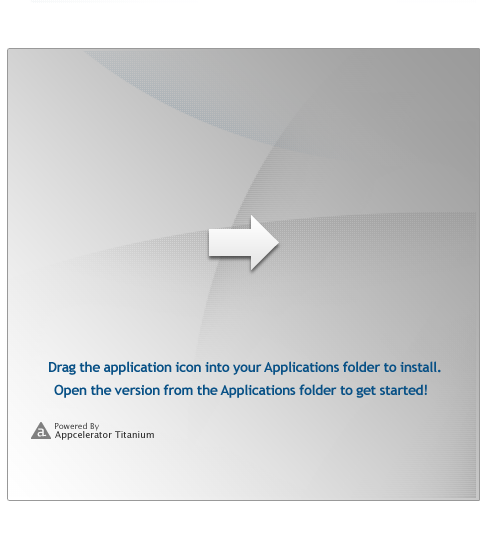
<style>
.page{position:relative;width:487px;height:535px}
.page>*{position:absolute;margin:0}
.t1{font:14px "TrebuchetMS-Bold";letter-spacing:-0.03em;color:#095186}
</style>
<div class="page">
<p class="t1" style="left:49px;top:361px;width:392px;height:14px">Drag the application icon into your Applications folder to install.</p>
<p class="t1" style="left:54px;top:384px;width:373px;height:14px">Open the version from the Applications folder to get started!</p>
</div>
